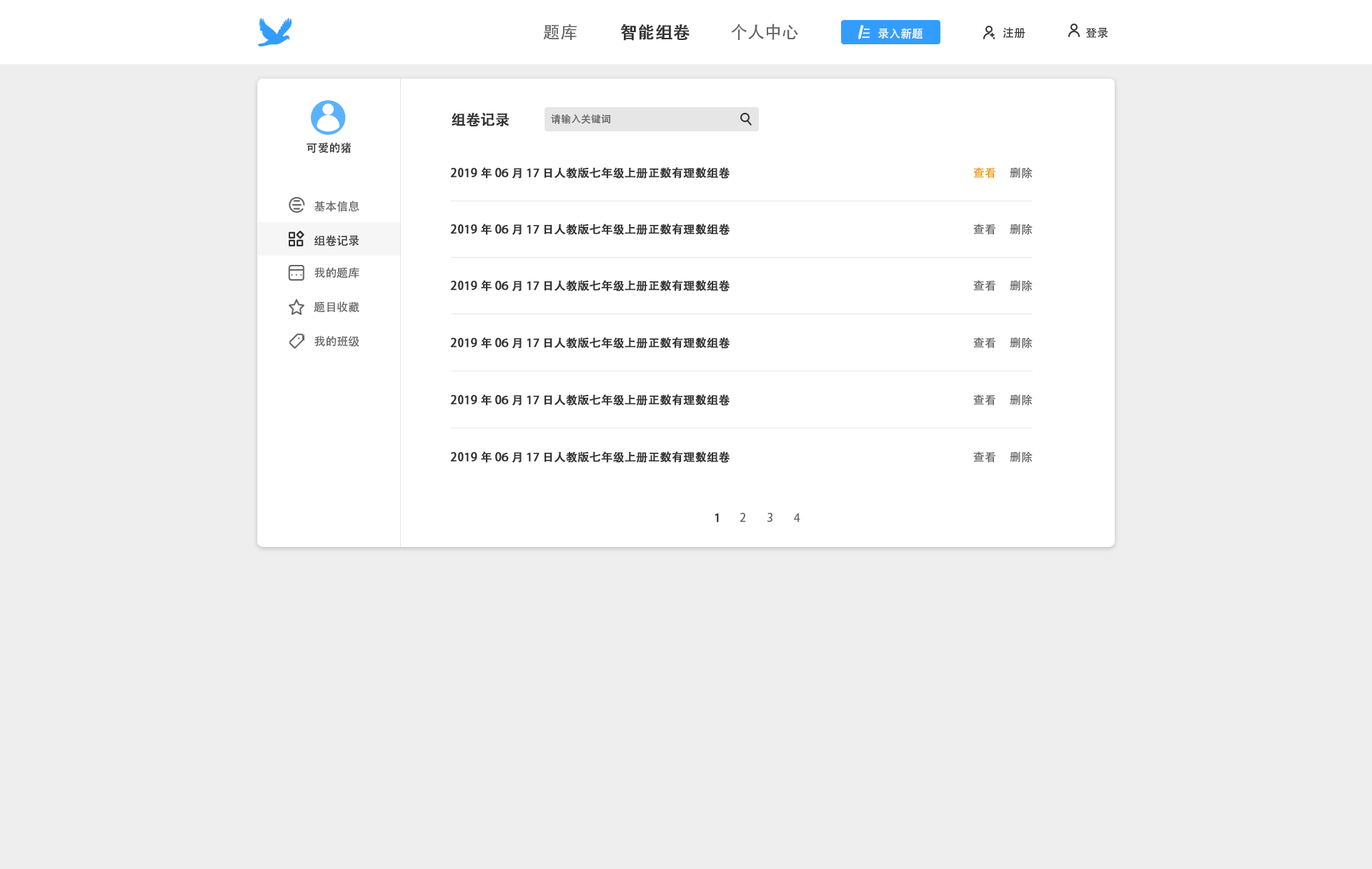
<style>
.page{position:relative;width:1372px;height:869px;background:#eeeeee}
.page>*{position:absolute;margin:0}
.t1{font:17.1px "AdobeHeitiStd-Regular";color:#666666}
.t2{font:17.1px "AdobeHeitiStd-Regular";color:#333333;font-weight:bold}
.t3{font:11.4px "AdobeHeitiStd-Regular";color:#ffffff}
.t4{font:11.4px "AdobeHeitiStd-Regular";color:#333333}
.t5{font:14.3px "AdobeHeitiStd-Regular";color:#333333;font-weight:bold}
.t6{font:10px "AdobeHeitiStd-Regular";color:#666666}
.t7{font:11.4px "AdobeHeitiStd-Regular";color:#333333;font-weight:bold}
.t8{font:11.4px "AdobeHeitiStd-Regular";color:#ee9900}
.t9{font:11.4px "AdobeHeitiStd-Regular";color:#666666}
</style>
<div class="page">
<p class="t1" style="left:543px;top:24px;width:33px;height:16px">题库</p>
<p class="t2" style="left:621px;top:24px;width:68px;height:17px">智能组卷</p>
<p class="t1" style="left:731px;top:24px;width:67px;height:16px">个人中心</p>
<p class="t3" style="left:878px;top:28px;width:44px;height:11px">录入新题</p>
<p class="t4" style="left:1002px;top:27px;width:23px;height:12px">注册</p>
<p class="t4" style="left:1085px;top:27px;width:23px;height:12px">登录</p>
<p class="t5" style="left:451px;top:112px;width:58px;height:15px">组卷记录</p>
<p class="t6" style="left:551px;top:114px;width:59px;height:10px">请输入关键词</p>
<p class="t4" style="left:306px;top:142px;width:45px;height:12px">可爱的猪</p>
<p class="t7" style="left:450px;top:167px;width:280px;height:12px">2019年06月17日人教版七年级上册正数有理数组卷</p>
<p class="t8" style="left:973px;top:167px;width:22px;height:12px">查看</p>
<p class="t9" style="left:1009px;top:167px;width:23px;height:12px">删除</p>
<p class="t9" style="left:314px;top:201px;width:45px;height:11px">基本信息</p>
<p class="t7" style="left:450px;top:224px;width:280px;height:11px">2019年06月17日人教版七年级上册正数有理数组卷</p>
<p class="t9" style="left:973px;top:224px;width:22px;height:11px">查看</p>
<p class="t9" style="left:1009px;top:224px;width:23px;height:11px">删除</p>
<p class="t4" style="left:314px;top:235px;width:45px;height:11px">组卷记录</p>
<p class="t9" style="left:314px;top:267px;width:45px;height:12px">我的题库</p>
<p class="t7" style="left:450px;top:280px;width:280px;height:11px">2019年06月17日人教版七年级上册正数有理数组卷</p>
<p class="t9" style="left:973px;top:280px;width:22px;height:11px">查看</p>
<p class="t9" style="left:1009px;top:280px;width:23px;height:11px">删除</p>
<p class="t9" style="left:314px;top:301px;width:45px;height:12px">题目收藏</p>
<p class="t9" style="left:314px;top:336px;width:45px;height:11px">我的班级</p>
<p class="t7" style="left:450px;top:337px;width:280px;height:12px">2019年06月17日人教版七年级上册正数有理数组卷</p>
<p class="t9" style="left:973px;top:337px;width:22px;height:12px">查看</p>
<p class="t9" style="left:1009px;top:337px;width:23px;height:12px">删除</p>
<p class="t7" style="left:450px;top:394px;width:280px;height:12px">2019年06月17日人教版七年级上册正数有理数组卷</p>
<p class="t9" style="left:973px;top:394px;width:22px;height:12px">查看</p>
<p class="t9" style="left:1009px;top:394px;width:23px;height:12px">删除</p>
<p class="t7" style="left:450px;top:451px;width:280px;height:12px">2019年06月17日人教版七年级上册正数有理数组卷</p>
<p class="t9" style="left:973px;top:451px;width:22px;height:12px">查看</p>
<p class="t9" style="left:1009px;top:451px;width:23px;height:12px">删除</p>
<p class="t7" style="left:714px;top:514px;width:5px;height:9px">1</p>
<p class="t9" style="left:739px;top:513px;width:7px;height:9px">2</p>
<p class="t9" style="left:767px;top:513px;width:5px;height:9px">3</p>
<p class="t9" style="left:794px;top:514px;width:6px;height:8px">4</p>
</div>
